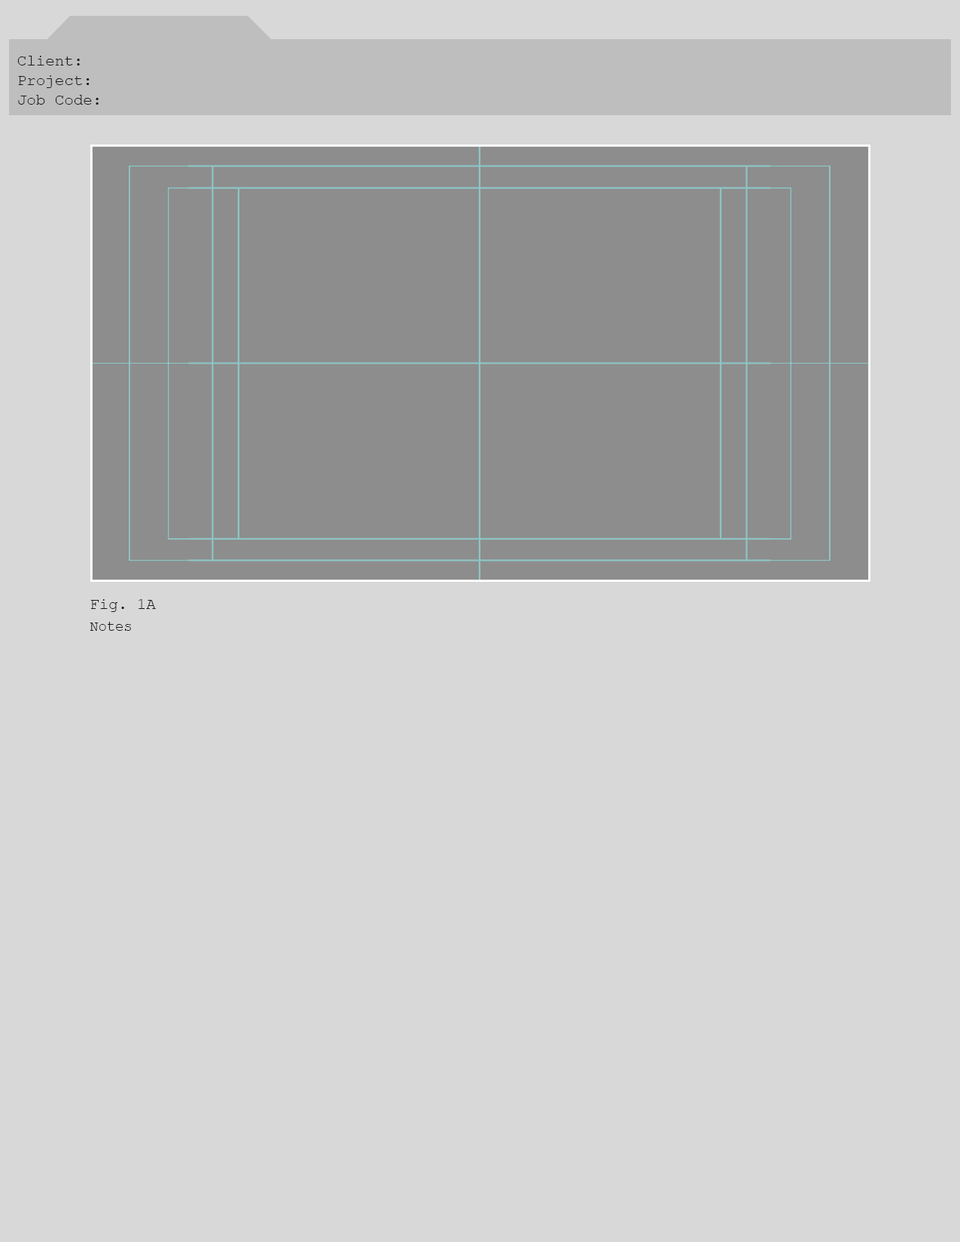
<style>
.page{position:relative;width:960px;height:1242px;background:#d8d8d8}
.page>*{position:absolute;margin:0}
.t1{font:15.7px "CourierNewPSMT";color:#191919}
.t2{font:14.1px "CourierNewPSMT";color:#191919}
</style>
<div class="page">
<p class="t1" style="left:17px;top:56px;width:63px;height:9px">Client:</p>
<p class="t1" style="left:18px;top:75px;width:72px;height:13px">Project:</p>
<p class="t1" style="left:18px;top:95px;width:81px;height:10px">Job Code:</p>
<p class="t1" style="left:90px;top:599px;width:66px;height:13px">Fig. 1A</p>
<p class="t2" style="left:90px;top:622px;width:41px;height:9px">Notes</p>
</div>
